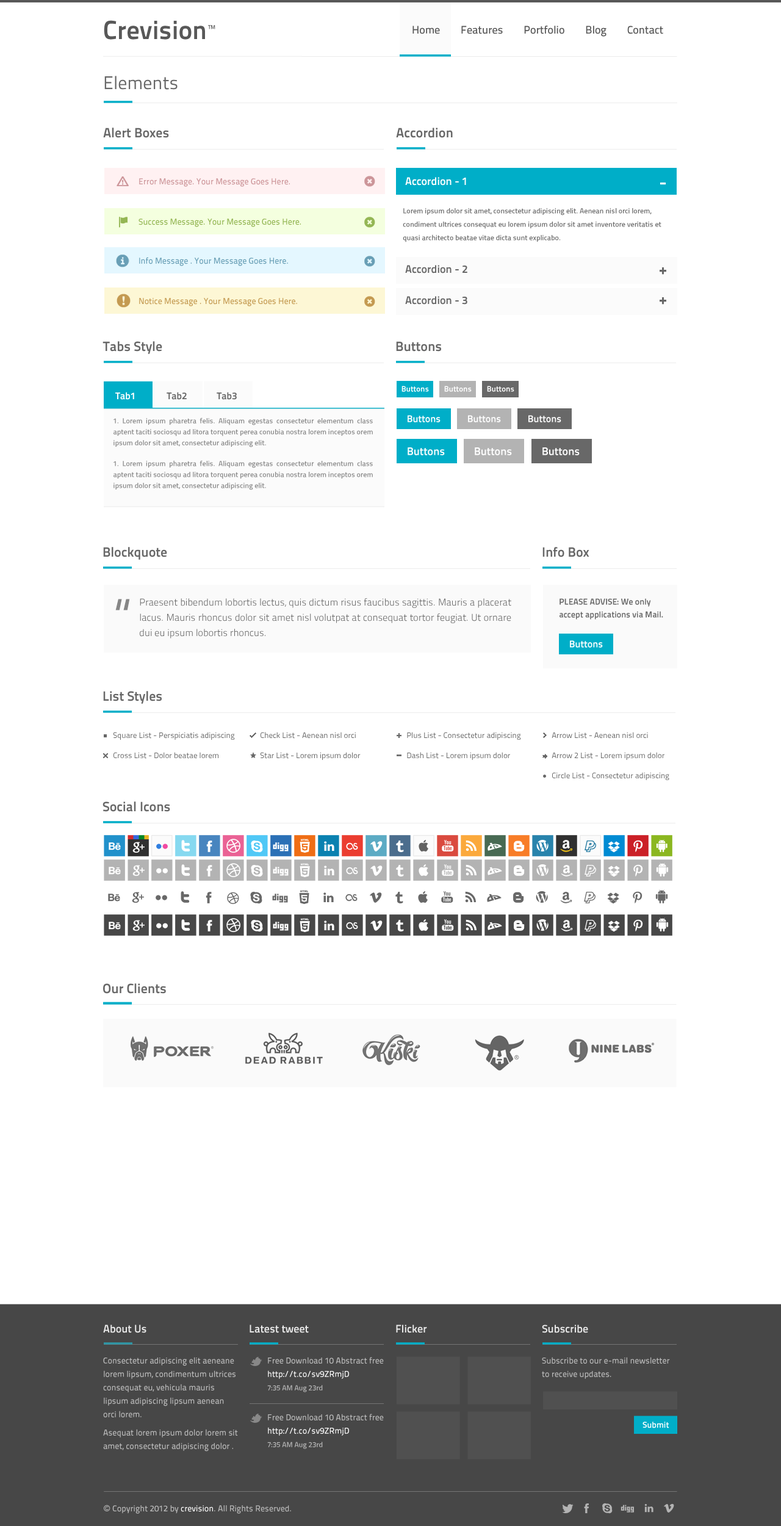
<style>
.page{position:relative;width:781px;height:1526px;background:#ffffff}
.page>*{position:absolute;margin:0}
.t1{font:11px "TitilliumText22L-Medium";color:#585858}
.t2{font:18.3px "TitilliumText22L-Regular";color:#686868}
.t3{font:13.4px "TitilliumText22L-Bold";color:#686868}
.t4{font:8.5px "TitilliumText22L-Medium";color:#c98f92}
.t5{font:11px "TitilliumText22L-Bold";color:#ffffff}
.t6{font:7.3px/13.4px "TitilliumText22L-Medium";color:#686868}
.t7{font:8.5px "TitilliumText22L-Medium";color:#94b654}
.t8{font:8.5px "TitilliumText22L-Medium";color:#699fb6}
.t9{font:11px "TitilliumText22L-Bold";color:#686868}
.t10{font:8.5px "TitilliumText22L-Medium";color:#c49a51}
.t11{font:7.9px "TitilliumText22L-Bold";color:#ffffff}
.t12{font:9.8px "TitilliumText22L-Bold";color:#ffffff}
.t13{font:9.8px "TitilliumText22L-Bold";color:#686868}
.t14{font:8.5px "TitilliumText22L-Bold";color:#686868}
.t15{font:7.3px/11px "TitilliumText22L-Medium";color:#868686}
.t16{font:50.4px "TitilliumText22L-Regular";color:#868686}
.t17{font:9.8px/15.3px "TitilliumText22L-Light";color:#686868}
.t18{font:8.5px/12.8px "TitilliumText22L-Bold";color:#686868}
.t19{font:7.9px/20.1px "TitilliumText22L-Regular";color:#686868}
.t20{font:11px "TitilliumText22L-Bold";color:#e8e8e8}
.t21{font:8.5px/13.4px "TitilliumText22L-Medium";color:#b9b9b9}
.t22{font:8.5px/13.4px "TitilliumText22L-Medium";color:#fafafa}
.t23{font:7.3px/13.4px "TitilliumText22L-Medium";color:#b9b9b9}
.t24{font:8.5px "TitilliumText22L-Bold";color:#ffffff}
.t25{font:8.5px "TitilliumText22L-Medium";color:#b9b9b9}
.t26{font:8.5px "ArialMT";color:#b9b9b9}
.t27{font:8.5px "TitilliumText22L-Medium";color:#fafafa}
</style>
<div class="page">
<p class="t1" style="left:413px;top:26px;width:251px;height:11px">Home        Features        Portfolio        Blog        Contact</p>
<p class="t2" style="left:104px;top:76px;width:74px;height:14px">Elements</p>
<p class="t3" style="left:103px;top:128px;width:66px;height:10px">Alert Boxes</p>
<p class="t3" style="left:396px;top:128px;width:57px;height:10px">Accordion</p>
<p class="t4" style="left:139px;top:178px;width:151px;height:9px">Error Message. Your Message Goes Here.</p>
<p class="t5" style="left:405px;top:177px;width:61px;height:9px">Accordion - 1</p>
<p class="t6" style="left:403px;top:208px;width:259px;height:34px">Lorem ipsum dolor sit amet, consectetur adipiscing elit. Aenean nisl orci lorem, condiment ultrices consequat eu lorem ipsum dolor sit amet inventore veritatis et quasi architecto beatae vitae dicta sunt explicabo.</p>
<p class="t7" style="left:139px;top:219px;width:162px;height:8px">Success Message. Your Message Goes Here.</p>
<p class="t8" style="left:139px;top:257px;width:149px;height:9px">Info Message . Your Message Goes Here.</p>
<p class="t9" style="left:405px;top:265px;width:63px;height:8px">Accordion - 2</p>
<p class="t10" style="left:139px;top:298px;width:158px;height:8px">Notice Message . Your Message Goes Here.</p>
<p class="t9" style="left:405px;top:296px;width:63px;height:9px">Accordion - 3</p>
<p class="t3" style="left:103px;top:341px;width:59px;height:13px">Tabs Style</p>
<p class="t3" style="left:396px;top:341px;width:45px;height:11px">Buttons</p>
<p class="t11" style="left:402px;top:386px;width:27px;height:6px">Buttons</p>
<p class="t11" style="left:444px;top:386px;width:28px;height:6px">Buttons</p>
<p class="t11" style="left:487px;top:386px;width:28px;height:6px">Buttons</p>
<p class="t12" style="left:115px;top:392px;width:19px;height:8px"><span class="t9">    </span>Tab1</p>
<p class="t13" style="left:167px;top:392px;width:20px;height:8px"><span class="t14">    </span>Tab2</p>
<p class="t13" style="left:217px;top:392px;width:20px;height:8px"><span class="t14">    </span>Tab3</p>
<p class="t15" style="left:114px;top:418px;width:259px;height:29px;text-align:justify">1. Lorem ipsum pharetra felis. Aliquam egestas consectetur elementum class aptent taciti sociosqu ad litora torquent perea conubia nostra lorem inceptos orem ipsum dolor sit amet, consectetur adipiscing elit.</p>
<p class="t12" style="left:408px;top:415px;width:33px;height:7px">Buttons</p>
<p class="t12" style="left:468px;top:415px;width:33px;height:7px">Buttons</p>
<p class="t12" style="left:529px;top:415px;width:33px;height:7px">Buttons</p>
<p class="t5" style="left:408px;top:447px;width:37px;height:8px">Buttons</p>
<p class="t5" style="left:475px;top:447px;width:37px;height:8px">Buttons</p>
<p class="t5" style="left:543px;top:447px;width:37px;height:8px">Buttons</p>
<p class="t15" style="left:114px;top:460px;width:259px;height:30px;text-align:justify">1. Lorem ipsum pharetra felis. Aliquam egestas consectetur elementum class aptent taciti sociosqu ad litora torquent perea conubia nostra lorem inceptos orem ipsum dolor sit amet, consectetur adipiscing elit.</p>
<p class="t3" style="left:103px;top:547px;width:64px;height:13px">Blockquote</p>
<p class="t3" style="left:543px;top:547px;width:47px;height:10px">Info Box</p>
<p class="t16" style="left:115px;top:599px;width:15px;height:11px;rotate:180deg">”</p>
<p class="t17" style="left:140px;top:598px;width:372px;height:41px;text-align:justify">Praesent bibendum lobortis lectus, quis dictum risus faucibus sagittis. Mauris a placerat lacus. Mauris rhoncus dolor sit amet nisl volutpat at consequat tortor feugiat. Ut ornare dui eu ipsum lobortis rhoncus.</p>
<p class="t18" style="left:560px;top:598px;width:104px;height:22px">PLEASE ADVISE: We only accept applications via Mail.</p>
<p class="t12" style="left:570px;top:640px;width:33px;height:8px">Buttons</p>
<p class="t3" style="left:103px;top:691px;width:59px;height:13px">List Styles</p>
<p class="t19" style="left:113px;top:732px;width:122px;height:27px">Square List - Perspiciatis adipiscing<br>    Cross List - Dolor beatae lorem</p>
<p class="t19" style="left:260px;top:732px;width:101px;height:28px">Check List - Aenean nisl orci<br>    Star List - Lorem ipsum dolor</p>
<p class="t19" style="left:407px;top:732px;width:114px;height:28px">Plus List - Consectetur adipiscing<br>    Dash List - Lorem ipsum dolor</p>
<p class="t19" style="left:552px;top:732px;width:118px;height:48px">Arrow List - Aenean nisl orci<br>    Arrow 2 List - Lorem ipsum dolor<br>    Circle List - Consectetur adipiscing</p>
<p class="t3" style="left:103px;top:802px;width:67px;height:10px">Social Icons</p>
<p class="t3" style="left:103px;top:983px;width:63px;height:11px">Our Clients</p>
<p class="t20" style="left:103px;top:1325px;width:44px;height:8px">About Us</p>
<p class="t20" style="left:250px;top:1325px;width:59px;height:8px">Latest tweet</p>
<p class="t20" style="left:396px;top:1325px;width:31px;height:8px">Flicker</p>
<p class="t20" style="left:542px;top:1325px;width:46px;height:8px">Subscribe</p>
<p class="t21" style="left:103px;top:1357px;width:135px;height:95px">Consectetur adipiscing elit aeneane lorem lipsum, condimentum ultrices consequat eu, vehicula mauris lipsum adipiscing lipsum aenean orci lorem.<br><br>Asequat lorem ipsum dolor lorem sit amet, consectetur adipiscing dolor .</p>
<p class="t21" style="left:267px;top:1357px;width:117px;height:35px">Free Download 10 Abstract free<br><span class="t22">http://t.co/sv9ZRmjD <br></span><span class="t23">7:35 AM Aug 23rd</span></p>
<p class="t21" style="left:542px;top:1357px;width:128px;height:22px">Subscribe to our e-mail newsletter to receive updates.</p>
<p class="t21" style="left:267px;top:1414px;width:117px;height:35px">Free Download 10 Abstract free<br><span class="t22">http://t.co/sv9ZRmjD <br></span><span class="t23">7:35 AM Aug 23rd</span></p>
<p class="t24" style="left:643px;top:1422px;width:27px;height:6px">Submit</p>
<p class="t25" style="left:104px;top:1505px;width:187px;height:9px"><span class="t26">© </span>Copyright 2012 by <span class="t27">crevision</span>. All Rights Reserved.</p>
</div>
